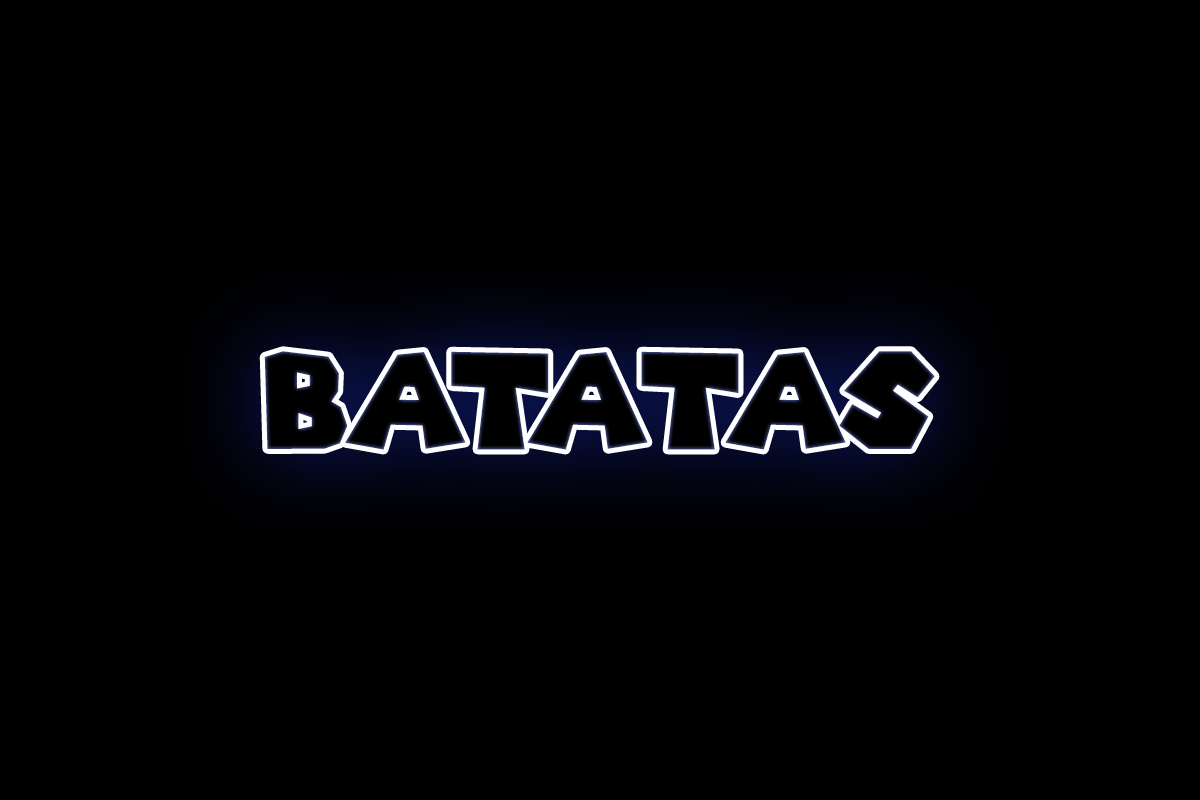
<style>
.page{position:relative;width:1200px;height:800px;background:#000000}
.page>*{position:absolute;margin:0}
.t1{font:131.1px "SuperMarioGalaxy";color:#000000}
.t2{font:131.1px "SuperMarioGalaxy";letter-spacing:0.16em;color:#000000}
.t3{font:131.1px "SuperMarioGalaxy";letter-spacing:-0.06em;color:#000000}
</style>
<div class="page">
<p class="t1" style="left:264px;top:351px;width:671px;height:99px"><span class="t2">b</span><span class="t3">at</span>atas</p>
</div>
